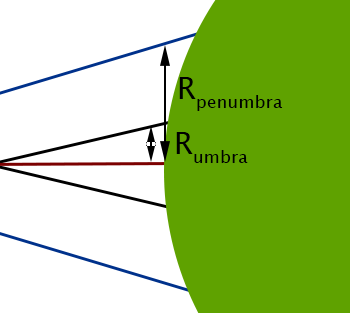
<style>
.page{position:relative;width:350px;height:313px;background:#5fa200}
.page>*{position:absolute;margin:0}
.t1{font:30px "LucidaSansUnicode";color:#000000}
</style>
<div class="page">
<p class="t1" style="left:179px;top:77px;width:104px;height:34px">Rpenumbra</p>
<p class="t1" style="left:176px;top:132px;width:72px;height:31px">Rumbra</p>
</div>
